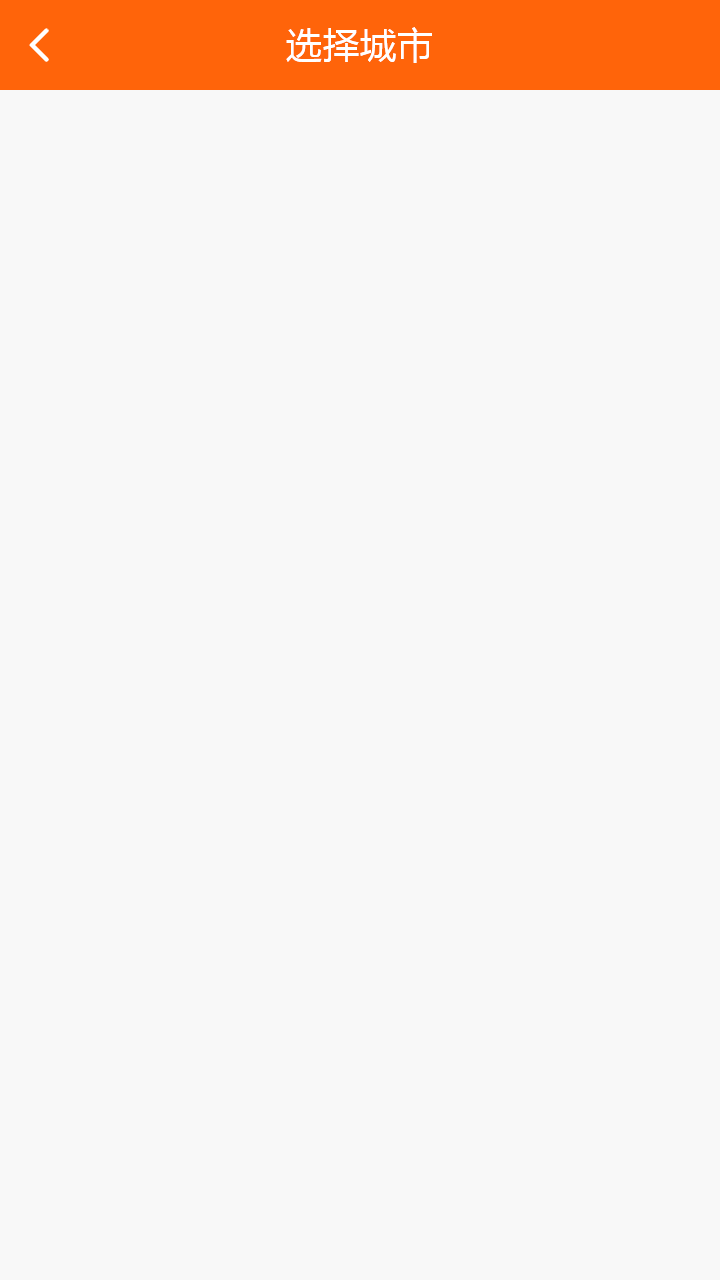
<style>
.page{position:relative;width:720px;height:1280px;background:#f8f8f8}
.page>*{position:absolute;margin:0}
.t1{font:36px "MicrosoftYaHei";letter-spacing:0.03em;color:#ffffff}
</style>
<div class="page">
<p class="t1" style="left:286px;top:27px;width:146px;height:36px">选择城市</p>
</div>
